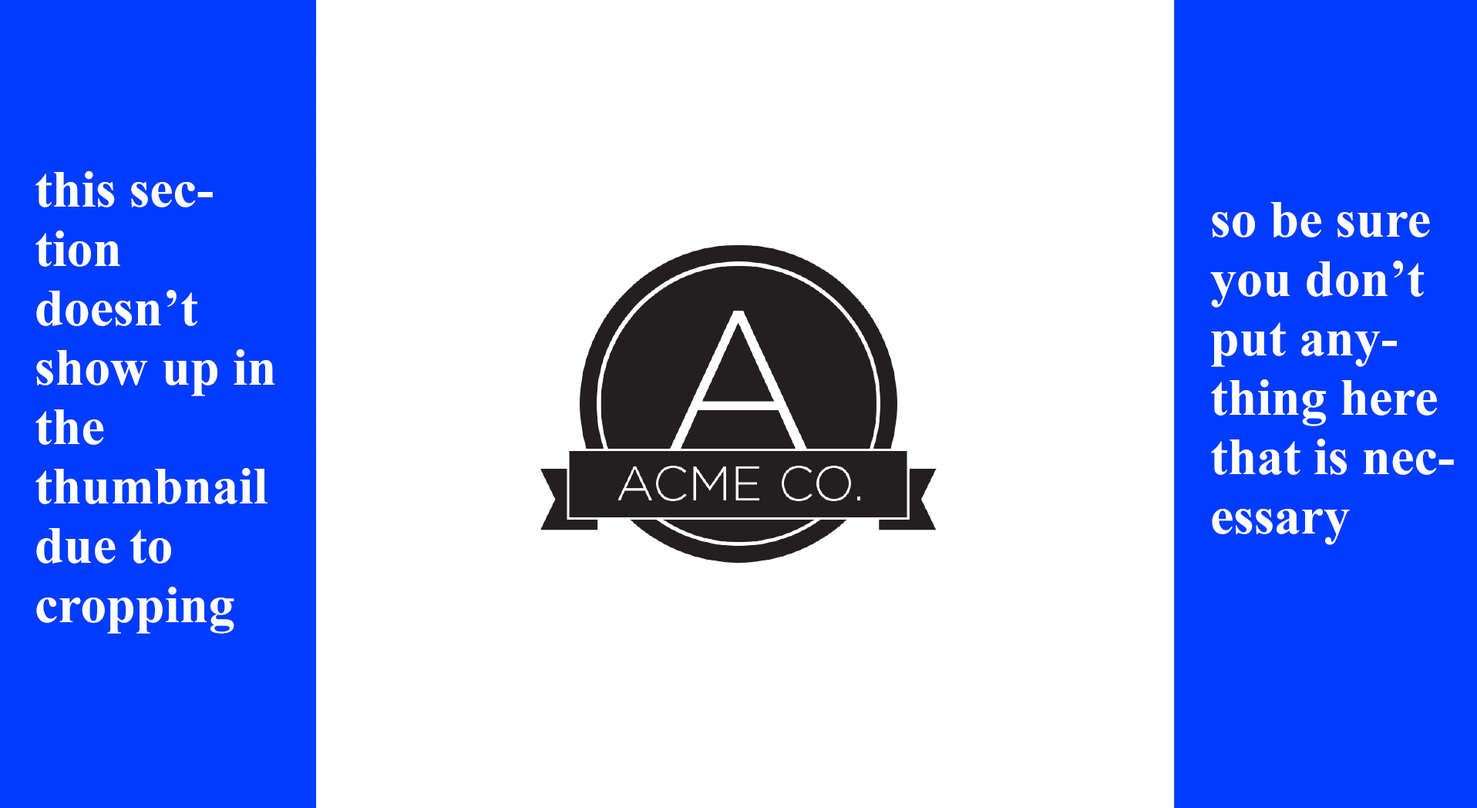
<style>
.page{position:relative;width:1477px;height:808px;background:#ffffff}
.page>*{position:absolute;margin:0}
.t1{font:52.4px/59.3px "TimesNewRomanPS-BoldMT";color:#ffffff}
</style>
<div class="page">
<p class="t1" style="left:35px;top:171px;width:240px;height:462px">this section doesn’t show up in the thumbnail due to cropping</p>
<p class="t1" style="left:1210px;top:202px;width:243px;height:343px">so be sure you don’t put anything here that is necessary</p>
</div>
